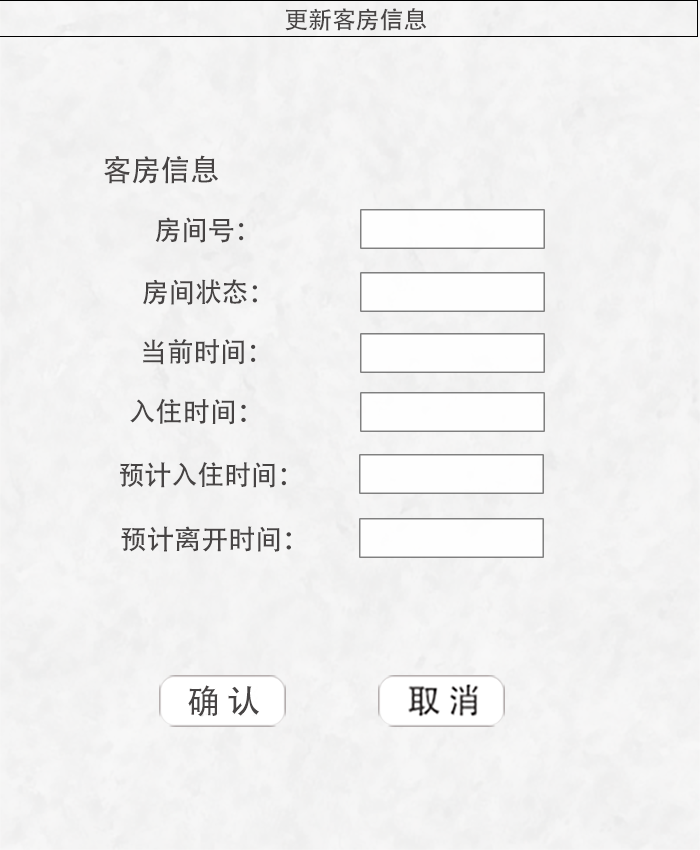
<style>
.page{position:relative;width:700px;height:850px}
.page>*{position:absolute;margin:0}
.t1{font:24px "AdobeHeitiStd-Regular";letter-spacing:-0.005em;color:#474444;text-transform:uppercase}
.t2{font:29.7px "AdobeHeitiStd-Regular";letter-spacing:-0.005em;color:#474444;text-transform:uppercase}
.t3{font:27px "AdobeHeitiStd-Regular";letter-spacing:-0.005em;color:#474444;text-transform:uppercase}
</style>
<div class="page">
<p class="t1" style="left:285px;top:8px;width:142px;height:23px">更新客房信息</p>
<p class="t2" style="left:104px;top:155px;width:114px;height:29px">客房信息</p>
<p class="t3" style="left:155px;top:217px;width:89px;height:26px">房间号：</p>
<p class="t3" style="left:143px;top:279px;width:114px;height:26px">房间状态：</p>
<p class="t3" style="left:143px;top:339px;width:113px;height:26px">当前时间：</p>
<p class="t3" style="left:130px;top:398px;width:116px;height:27px">入住时间：</p>
<p class="t3" style="left:120px;top:462px;width:166px;height:26px">预计入住时间：</p>
<p class="t3" style="left:121px;top:526px;width:170px;height:26px">预计离开时间：</p>
</div>
